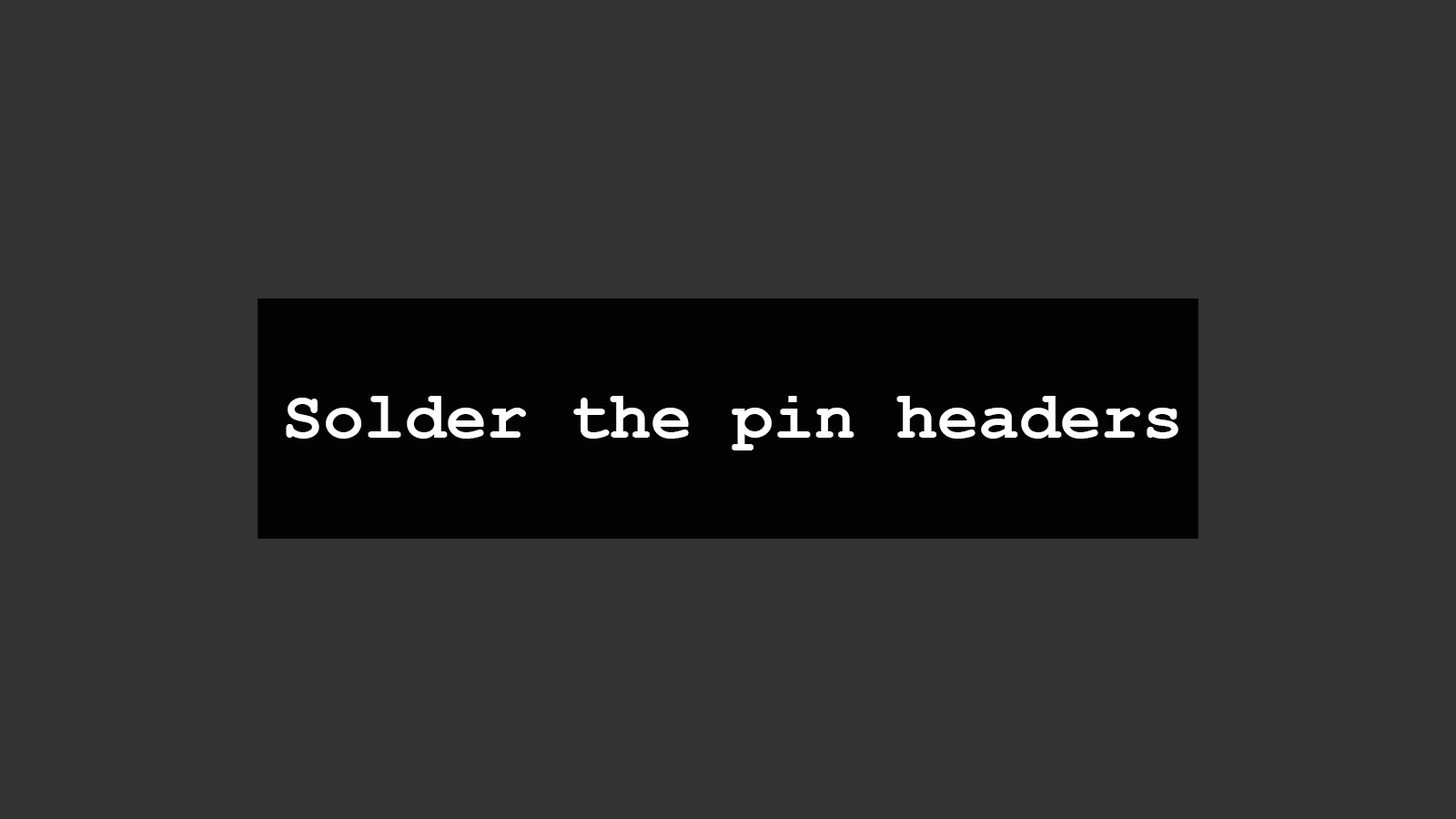
<style>
.page{position:relative;width:1456px;height:819px;background:#333333}
.page>*{position:absolute;margin:0}
.t1{font:68.2px "CourierNewPS-BoldMT";color:#ffffff}
</style>
<div class="page">
<p class="t1" style="left:286px;top:396px;width:892px;height:54px">Solder the pin headers</p>
</div>
